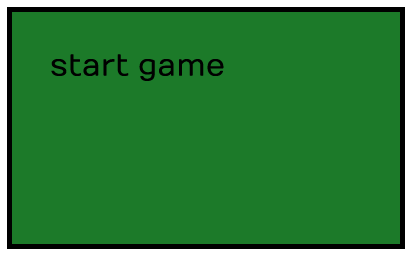
<style>
.page{position:relative;width:412px;height:256px;background:#1c7a29}
.page>*{position:absolute;margin:0}
.t1{font:30px "Numans-Regular";color:#000000}
</style>
<div class="page">
<p class="t1" style="left:51px;top:54px;width:173px;height:27px">start game</p>
</div>
